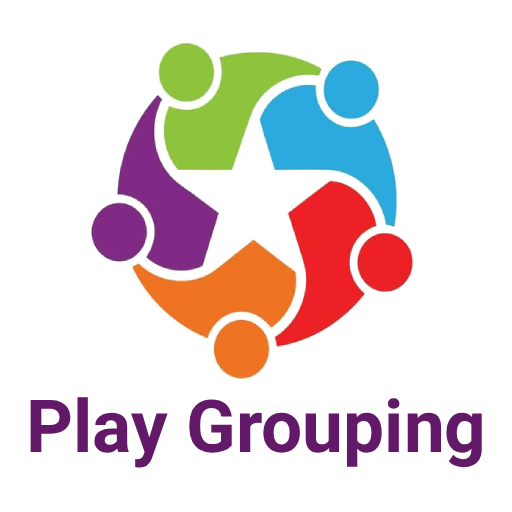
<style>
.page{position:relative;width:512px;height:512px;background:#ffffff}
.page>*{position:absolute;margin:0}
.t1{font:73px "Roboto-Bold";color:#621a68}
</style>
<div class="page">
<p class="t1" style="left:30px;top:397px;width:452px;height:71px">Play Grouping</p>
</div>
